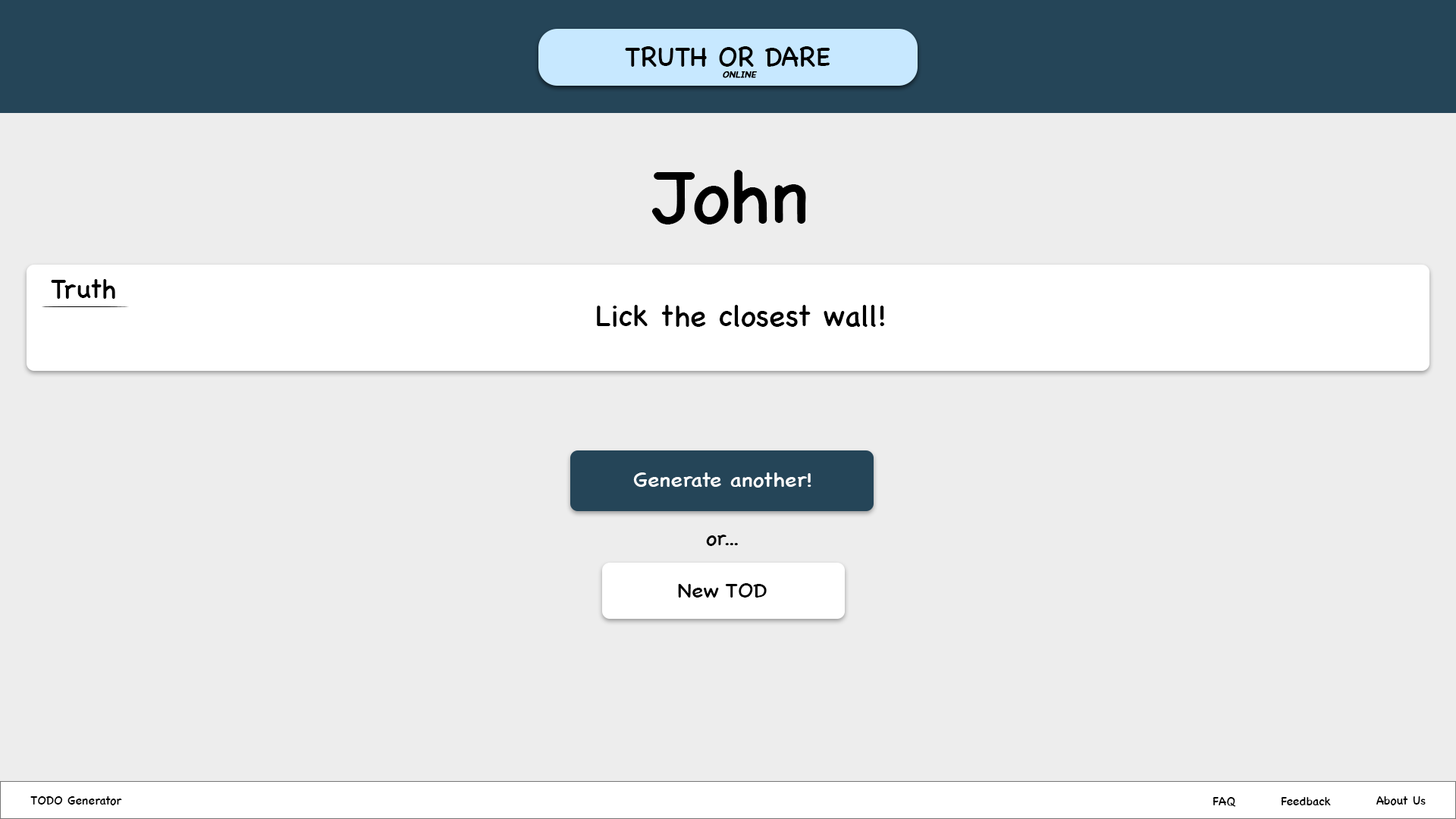
<style>
.page{position:relative;width:1456px;height:819px;background:#ededed}
.page>*{position:absolute;margin:0}
.t1{font:27.3px "ChalkboardSE-Regular";color:#000000}
.t2{font:9.1px "ChalkboardSE-Regular";color:#000000;font-weight:bold;font-style:italic}
.t3{font:75.8px "ChalkboardSE-Regular";color:#000000}
.t4{font:30.3px "ChalkboardSE-Regular";color:#000000}
.t5{font:20.3px "ChalkboardSE-Regular";color:#ffffff;scale:1.08 1}
.t6{font:20.3px "ChalkboardSE-Regular";color:#000000;scale:1.08 1}
.t7{font:12.1px "ChalkboardSE-Regular";color:#000000}
</style>
<div class="page">
<p class="t1" style="left:625px;top:46px;width:205px;height:21px">TRUTH OR DARE</p>
<p class="t2" style="left:723px;top:71px;width:34px;height:7px">ONLINE</p>
<p class="t3" style="left:651px;top:170px;width:155px;height:54px">John</p>
<p class="t1" style="left:51px;top:279px;width:64px;height:20px">Truth</p>
<p class="t4" style="left:597px;top:305px;width:287px;height:22px">Lick the closest wall!</p>
<p class="t5" style="left:633px;top:472px;width:178px;height:16px">Generate another!</p>
<p class="t6" style="left:706px;top:535px;width:32px;height:11px">or...</p>
<p class="t6" style="left:678px;top:583px;width:89px;height:15px">New TOD</p>
<p class="t7" style="left:30px;top:796px;width:92px;height:9px">TODO Generator</p>
<p class="t7" style="left:1213px;top:797px;width:23px;height:10px">FAQ</p>
<p class="t7" style="left:1281px;top:797px;width:50px;height:8px">Feedback</p>
<p class="t7" style="left:1376px;top:796px;width:50px;height:9px">About Us</p>
</div>
